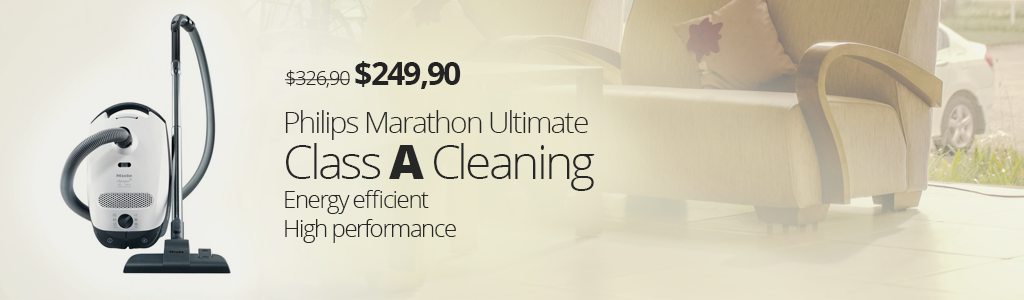
<style>
.page{position:relative;width:1024px;height:300px}
.page>*{position:absolute;margin:0}
.t1{font:20px "OpenSans-Light";letter-spacing:-0.06em;color:#232323}
.t2{font:32px "OpenSans-Bold";letter-spacing:-0.06em;color:#232323}
.t3{font:24px "OpenSans-Light";letter-spacing:-0.06em;color:#262626}
.t4{font:30px "OpenSans-Light";letter-spacing:-0.06em;color:#262626}
.t5{font:48px/46px "OpenSans-Light";letter-spacing:-0.06em;color:#262626}
.t6{font:48px/46px "OpenSans-Extrabold";letter-spacing:-0.06em;color:#262626}
</style>
<div class="page">
<p class="t1" style="left:285px;top:61px;width:176px;height:28px">$326,90 <span class="t2">$249,90</span></p>
<p class="t3" style="left:285px;top:110px;width:310px;height:133px"><span class="t4">Philips Marathon Ultimate<br></span><span class="t5">Class </span><span class="t6">A</span><span class="t5"> Cleaning<br></span>Energy efficient<br>High performance</p>
</div>
